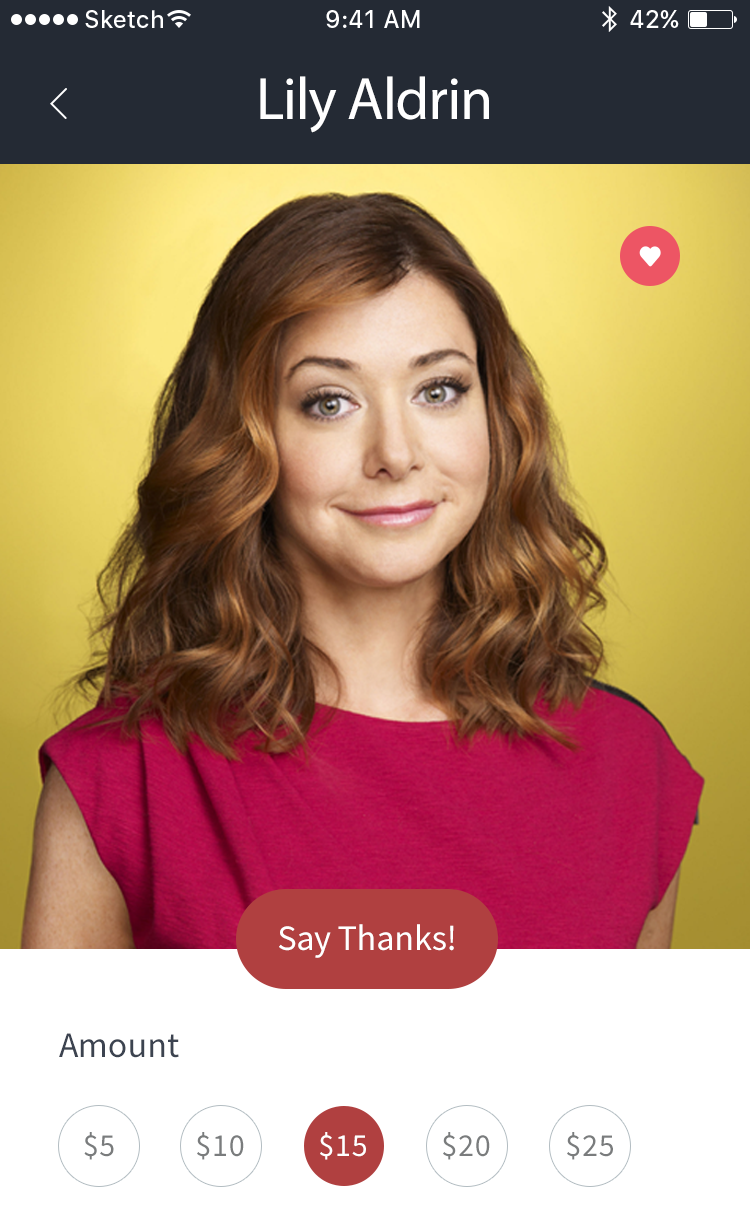
<style>
.page{position:relative;width:750px;height:1220px;background:#ffffff}
.page>*{position:absolute;margin:0}
.t1{font:24px "SFUIText-Medium";color:#ffffff}
.t2{font:60px "MyriadPro-Regular";letter-spacing:-0.02em;color:#ffffff}
.t3{font:36px "SourceSansPro-Regular";letter-spacing:-0.005em;color:#ffffff}
.t4{font:36px "SourceSansPro-Regular";letter-spacing:-0.005em;color:#3c4350}
.t5{font:32px "SourceSansPro-Regular";letter-spacing:0.02em;color:#7a7c7d}
.t6{font:32px "SourceSansPro-Regular";letter-spacing:0.02em;color:#ffffff}
</style>
<div class="page">
<p class="t1" style="left:85px;top:10px;width:78px;height:18px">Sketch</p>
<p class="t1" style="left:326px;top:10px;width:94px;height:18px">9:41 AM</p>
<p class="t1" style="left:630px;top:10px;width:49px;height:18px">42%</p>
<p class="t2" style="left:260px;top:76px;width:229px;height:57px">Lily Aldrin</p>
<p class="t3" style="left:279px;top:924px;width:175px;height:34px">Say Thanks!</p>
<p class="t4" style="left:59px;top:1033px;width:120px;height:25px">Amount</p>
<p class="t5" style="left:84px;top:1132px;width:30px;height:28px">$5</p>
<p class="t5" style="left:197px;top:1132px;width:47px;height:28px">$10</p>
<p class="t6" style="left:320px;top:1132px;width:46px;height:28px">$15</p>
<p class="t5" style="left:443px;top:1132px;width:47px;height:28px">$20</p>
<p class="t5" style="left:567px;top:1132px;width:46px;height:28px">$25</p>
</div>
